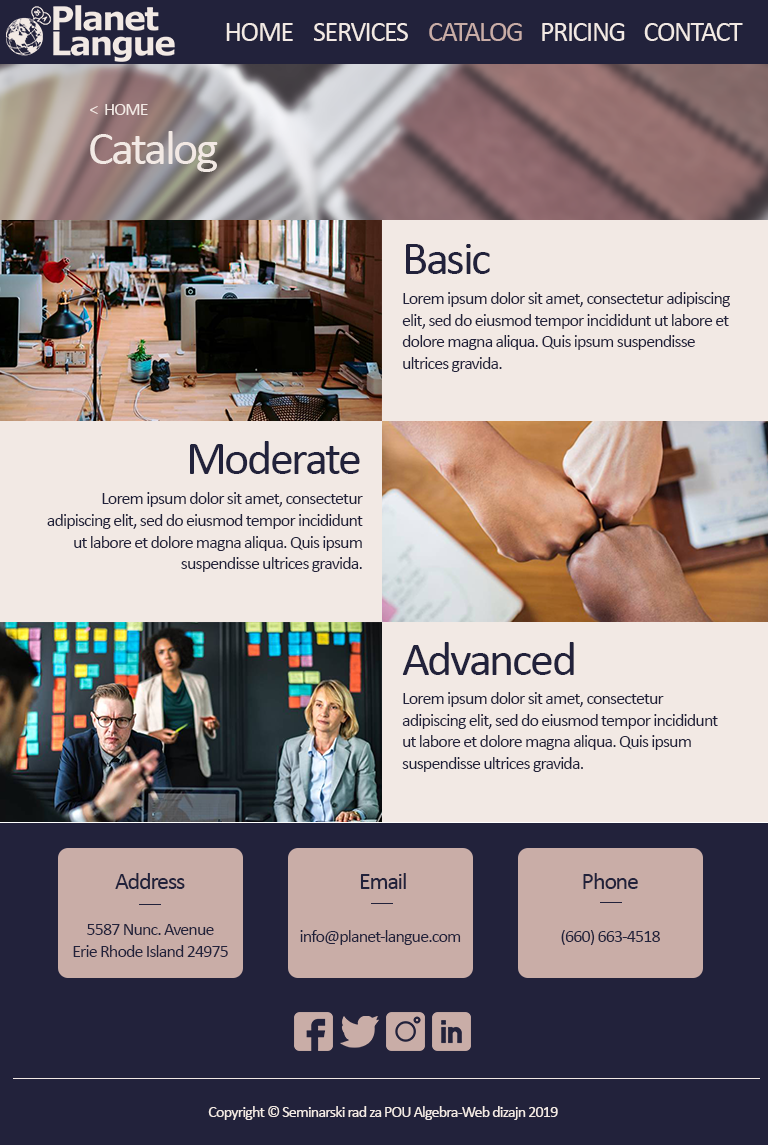
<style>
.page{position:relative;width:768px;height:1145px;background:#f2e9e4}
.page>*{position:absolute;margin:0}
.t1{font:28px "Calibri";letter-spacing:-0.05em;color:#f2e9e4}
.t2{font:28px "Calibri";letter-spacing:-0.05em;color:#c9ada7}
.t3{font:18px "Calibri";letter-spacing:-0.05em;color:#f2e9e4}
.t4{font:48px "Calibri";letter-spacing:-0.05em;color:#f2e9e4}
.t5{font:48px "Calibri";letter-spacing:-0.05em;color:#22223b}
.t6{font:18px "Calibri";letter-spacing:-0.05em;color:#22223b}
.t7{font:24px "Calibri";letter-spacing:-0.05em;color:#22223b}
.t8{font:16px "Calibri";letter-spacing:-0.05em;color:#f2e9e4}
</style>
<div class="page">
<p class="t1" style="left:226px;top:23px;width:67px;height:18px">HOME</p>
<p class="t1" style="left:314px;top:23px;width:94px;height:18px">SERVICES</p>
<p class="t2" style="left:429px;top:23px;width:93px;height:18px">CATALOG</p>
<p class="t1" style="left:542px;top:23px;width:83px;height:18px">PRICING</p>
<p class="t1" style="left:644px;top:23px;width:99px;height:18px">CONTACT</p>
<p class="t3" style="left:90px;top:104px;width:58px;height:11px">&lt;  HOME</p>
<p class="t4" style="left:90px;top:131px;width:128px;height:41px">Catalog</p>
<p class="t5" style="left:406px;top:244px;width:84px;height:30px">Basic</p>
<p class="t6" style="left:402px;top:292px;width:328px;height:80px">Lorem ipsum dolor sit amet, consectetur adipiscing elit, sed do eiusmod tempor incididunt ut labore et dolore magna aliqua. Quis ipsum suspendisse ultrices gravida.</p>
<p class="t5" style="left:190px;top:441px;width:170px;height:33px">Moderate</p>
<p class="t6" style="left:47px;top:492px;width:316px;height:80px;text-align:right">Lorem ipsum dolor sit amet, consectetur adipiscing elit, sed do eiusmod tempor incididunt ut labore et dolore magna aliqua. Quis ipsum suspendisse ultrices gravida.</p>
<p class="t5" style="left:402px;top:642px;width:172px;height:33px">Advanced</p>
<p class="t6" style="left:402px;top:692px;width:316px;height:80px">Lorem ipsum dolor sit amet, consectetur adipiscing elit, sed do eiusmod tempor incididunt ut labore et dolore magna aliqua. Quis ipsum suspendisse ultrices gravida.</p>
<p class="t7" style="left:115px;top:873px;width:70px;height:16px">Address</p>
<p class="t7" style="left:360px;top:873px;width:46px;height:16px">Email</p>
<p class="t7" style="left:583px;top:873px;width:55px;height:16px">Phone</p>
<p class="t6" style="left:73px;top:924px;width:155px;height:33px;text-align:center">5587 Nunc. Avenue<br>Erie Rhode Island 24975</p>
<p class="t6" style="left:300px;top:930px;width:161px;height:15px">info@planet-langue.com</p>
<p class="t6" style="left:561px;top:930px;width:99px;height:15px">(660) 663-4518</p>
<p class="t8" style="left:208px;top:1106px;width:350px;height:14px">Copyright © Seminarski rad za POU Algebra-Web dizajn 2019</p>
</div>
